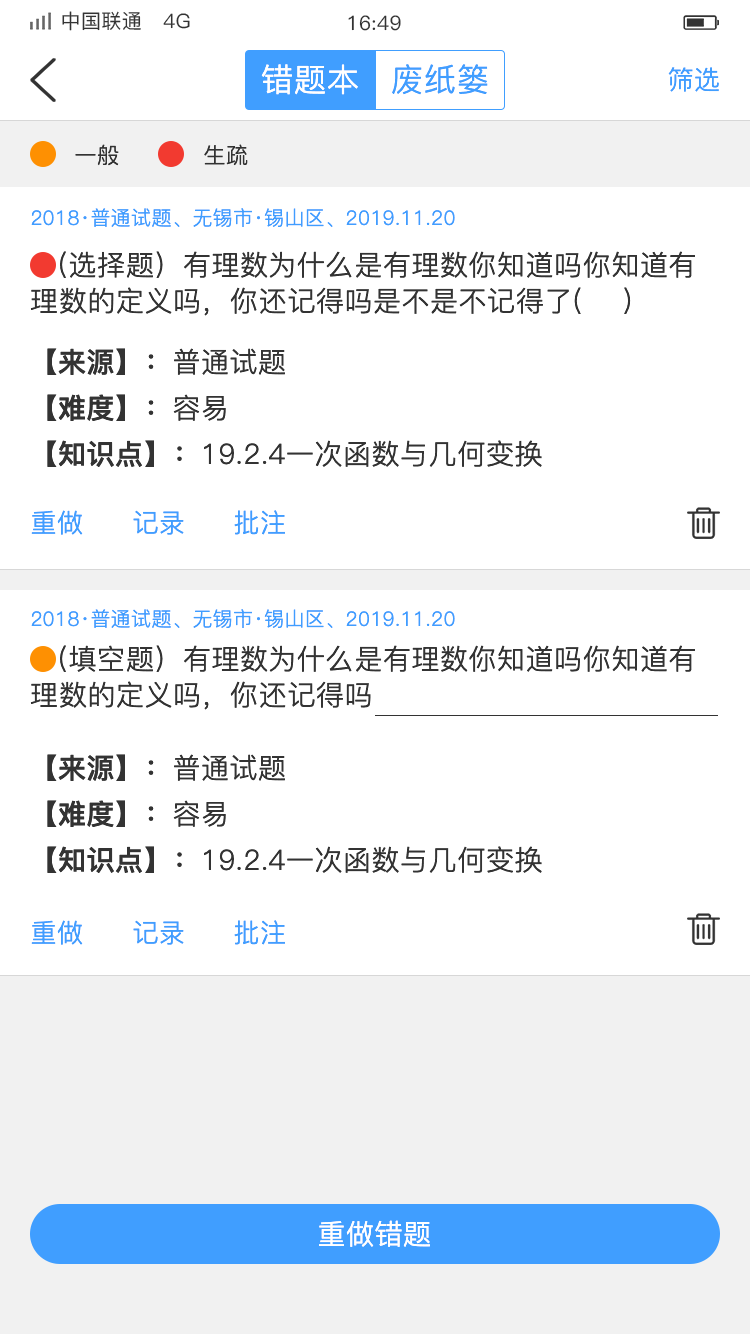
<style>
.page{position:relative;width:750px;height:1334px;background:#ffffff}
.page>*{position:absolute;margin:0}
.t1{font:20px "PingFang-SC-Medium";letter-spacing:0.02em;color:#333333}
.t2{font:32px "PingFang-SC-Regular";letter-spacing:0.02em;color:#ffffff}
.t3{font:32px "PingFang-SC-Regular";letter-spacing:0.02em;color:#409eff}
.t4{font:26px "PingFang-SC-Regular";letter-spacing:0.02em;color:#409eff}
.t5{font:22px "PingFang-SC-Regular";letter-spacing:0.02em;color:#333333}
.t6{font:20px "PingFang-SC-Regular";letter-spacing:0.02em;color:#409eff}
.t7{font:28px/36px "PingFang-SC-Regular";letter-spacing:0.02em;color:#333333}
.t8{font:28px "PingFang-SC-Bold";letter-spacing:0.02em;color:#333333}
.t9{font:28px "PingFang-SC-Regular";letter-spacing:0.02em;color:#333333}
.t10{font:28px "PingFang-SC-Regular";letter-spacing:0.02em;color:#ffffff}
</style>
<div class="page">
<p class="t1" style="left:62px;top:11px;width:128px;height:20px">中国联通   4G</p>
<p class="t1" style="left:348px;top:15px;width:53px;height:16px">16:49</p>
<p class="t2" style="left:261px;top:64px;width:97px;height:31px">错题本</p>
<p class="t3" style="left:392px;top:64px;width:96px;height:31px">废纸篓</p>
<p class="t4" style="left:668px;top:67px;width:51px;height:25px">筛选</p>
<p class="t5" style="left:75px;top:144px;width:44px;height:22px">一般</p>
<p class="t5" style="left:204px;top:144px;width:44px;height:22px">生疏</p>
<p class="t6" style="left:31px;top:208px;width:424px;height:19px">2018·普通试题、无锡市·锡山区、2019.11.20</p>
<p class="t7" style="left:30px;top:251px;width:665px;height:65px">（选择题）有理数为什么是有理数你知道吗你知道有理数的定义吗，你还记得吗是不是不记得了(    )</p>
<p class="t8" style="left:47px;top:348px;width:238px;height:27px">【来源】：<span class="t9">普通试题</span></p>
<p class="t8" style="left:47px;top:394px;width:179px;height:28px">【难度】：<span class="t9">容易</span></p>
<p class="t9" style="left:47px;top:440px;width:495px;height:27px"><span class="t8">【知识点】：</span>19.2.4一次函数与几何变换</p>
<p class="t4" style="left:31px;top:510px;width:52px;height:25px">重做</p>
<p class="t4" style="left:133px;top:510px;width:51px;height:25px">记录</p>
<p class="t4" style="left:234px;top:510px;width:51px;height:25px">批注</p>
<p class="t6" style="left:31px;top:609px;width:424px;height:19px">2018·普通试题、无锡市·锡山区、2019.11.20</p>
<p class="t7" style="left:30px;top:645px;width:665px;height:65px">（填空题）有理数为什么是有理数你知道吗你知道有理数的定义吗，你还记得吗</p>
<p class="t8" style="left:47px;top:754px;width:238px;height:27px">【来源】：<span class="t9">普通试题</span></p>
<p class="t8" style="left:47px;top:800px;width:179px;height:28px">【难度】：<span class="t9">容易</span></p>
<p class="t9" style="left:47px;top:846px;width:495px;height:27px"><span class="t8">【知识点】：</span>19.2.4一次函数与几何变换</p>
<p class="t4" style="left:31px;top:920px;width:52px;height:25px">重做</p>
<p class="t4" style="left:133px;top:920px;width:51px;height:25px">记录</p>
<p class="t4" style="left:234px;top:920px;width:51px;height:25px">批注</p>
<p class="t10" style="left:319px;top:1220px;width:111px;height:27px">重做错题</p>
</div>
